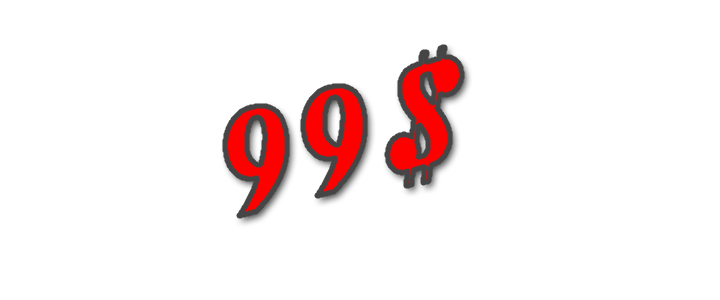
<style>
.page{position:relative;width:720px;height:300px;background:#ffffff}
.page>*{position:absolute;margin:0}
.t1{font:147.2px "Magneto-Bold";letter-spacing:0.05em;color:#fd0000;font-style:italic;scale:0.77 1}
</style>
<div class="page">
<p class="t1" style="left:225px;top:47px;width:237px;height:169px;rotate:-15deg">99$</p>
</div>
